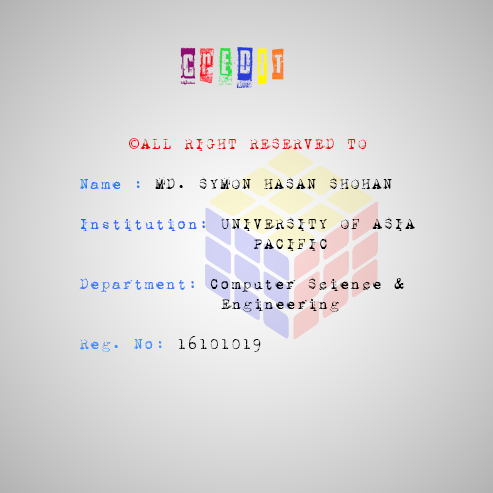
<style>
.page{position:relative;width:493px;height:493px}
.page>*{position:absolute;margin:0}
.t1{font:41.7px "Somethingintheway";color:#8f0d72}
.t2{font:41.7px "Somethingintheway";color:#fc0d1e}
.t3{font:41.7px "Somethingintheway";color:#32de47}
.t4{font:41.7px "Somethingintheway";color:#293ed7}
.t5{font:41.7px "Somethingintheway";color:#fff601}
.t6{font:41.7px "Somethingintheway";color:#ff7403}
.t7{font:16.7px "1942report";color:#000000}
.t8{font:16.7px "MyriadPro-Regular";color:#ea0808}
.t9{font:16.7px "1942report";color:#ea0808}
.t10{font:16.7px "1942report";color:#227efa}
.t11{font:16.7px "1942report";color:#2667fb}
.t12{font:16.7px "1942report";color:#3e7cf9}
.t13{font:16.7px "1942report";color:#3f90ff}
</style>
<div class="page">
<p class="t1" style="left:180px;top:45px;width:105px;height:44px">C <span class="t2">R </span><span class="t3">E </span><span class="t4">D </span><span class="t5">I </span><span class="t6">T</span></p>
<p class="t7" style="left:79px;top:137px;width:336px;height:215px;text-align:center"><span class="t8">©</span><span class="t9">ALL RIGHT RESERVED TO<br><br></span><span class="t10">Name :</span> MD. SYMON HASAN SHOHAN<br><br><span class="t11">Institution:</span> UNIVERSITY OF ASIA               PACIFIC<br><br><span class="t12">Department:</span> Computer Science &amp;          Engineering<br><br><span class="t13">Reg. No:</span> 16101019</p>
</div>
